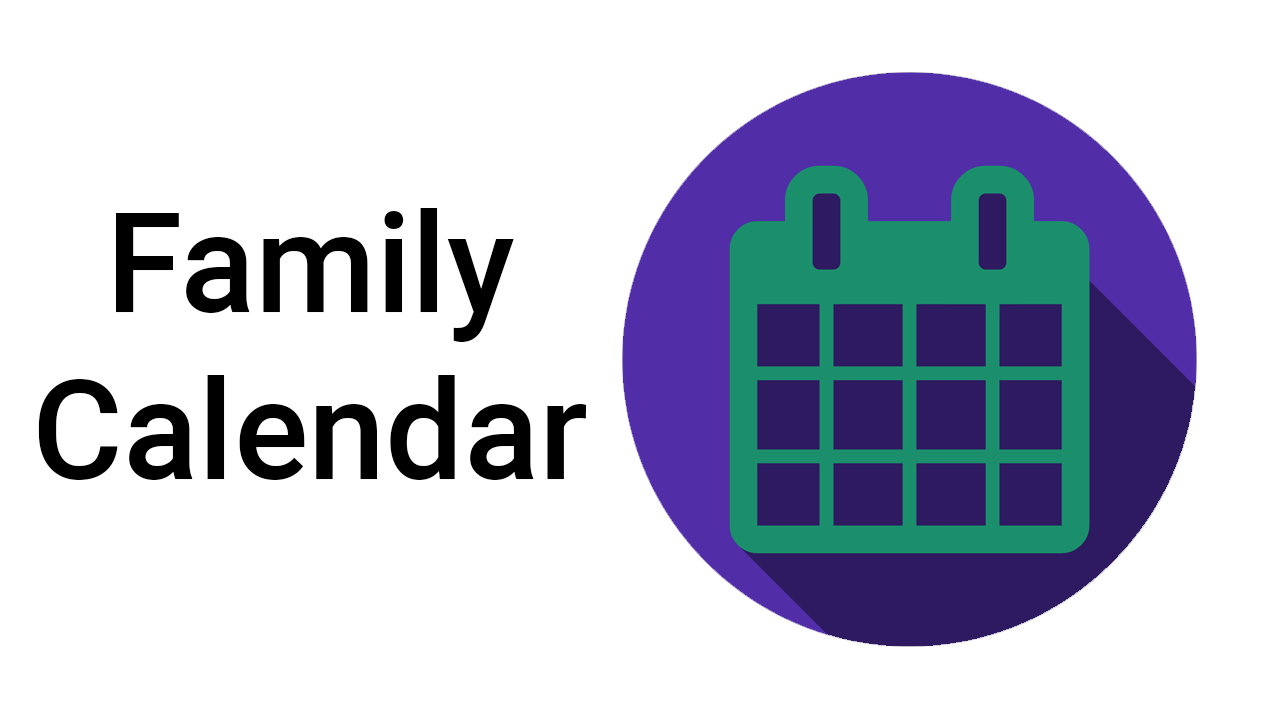
<style>
.page{position:relative;width:1280px;height:720px;background:#ffffff}
.page>*{position:absolute;margin:0}
.t1{font:139px "Roboto-Medium";color:#000000}
</style>
<div class="page">
<p class="t1" style="left:38px;top:208px;width:548px;height:272px;text-align:center">Family <br>Calendar</p>
</div>
